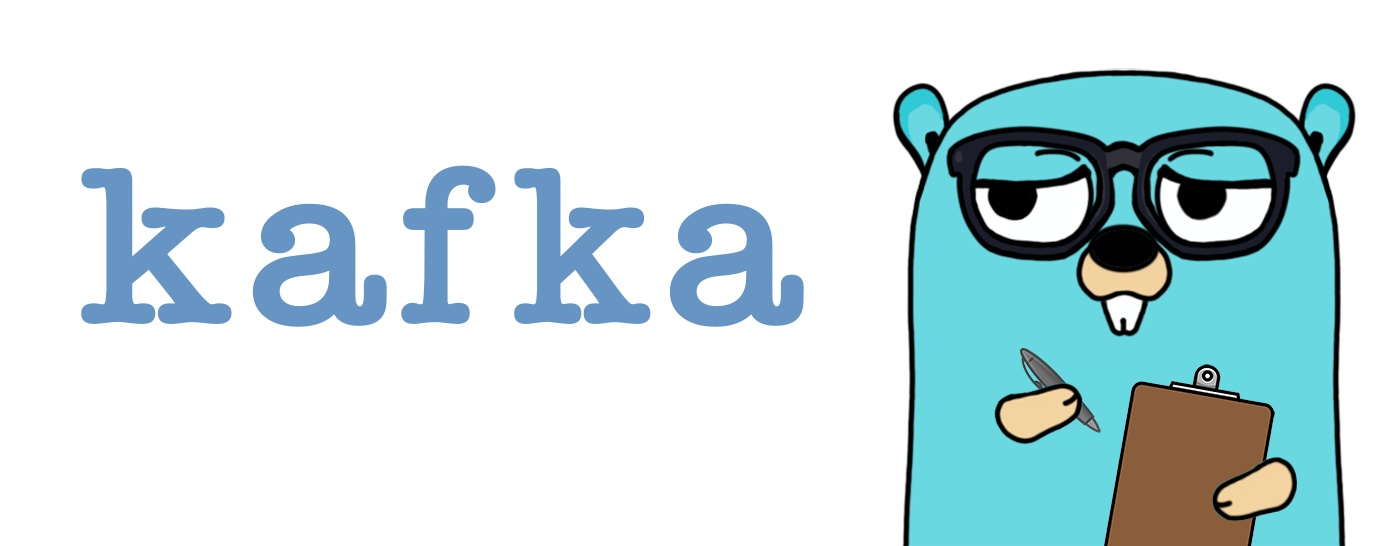
<style>
.page{position:relative;width:1400px;height:546px;background:#ffffff}
.page>*{position:absolute;margin:0}
.t1{font:231px "AmericanTypewriter-Semibold";letter-spacing:0.06em;color:#6795c3;scale:1.06 1}
.t2{font:231px "AmericanTypewriter-Semibold";letter-spacing:0.165em;color:#6795c3;scale:0.96 1}
.t3{font:231px "AmericanTypewriter-Semibold";letter-spacing:0.065em;color:#6795c3;scale:0.96 1}
.t4{font:231px "AmericanTypewriter-Semibold";letter-spacing:0.065em;color:#6795c3;scale:1.06 1}
</style>
<div class="page">
<p class="t1" style="left:81px;top:165px;width:723px;height:162px">ka<span class="t2">f</span><span class="t3">k</span><span class="t4">a</span></p>
</div>
